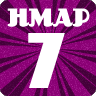
<style>
.page{position:relative;width:96px;height:96px;background:#ffffff}
.page>*{position:absolute;margin:0}
.t1{font:24px "Unicorn";color:#ffffff}
.t2{font:72px "Unicorn";color:#ffffff}
</style>
<div class="page">
<p class="t1" style="left:7px;top:8px;width:83px;height:19px">HMAP</p>
<p class="t2" style="left:28px;top:33px;width:37px;height:55px">7</p>
</div>
